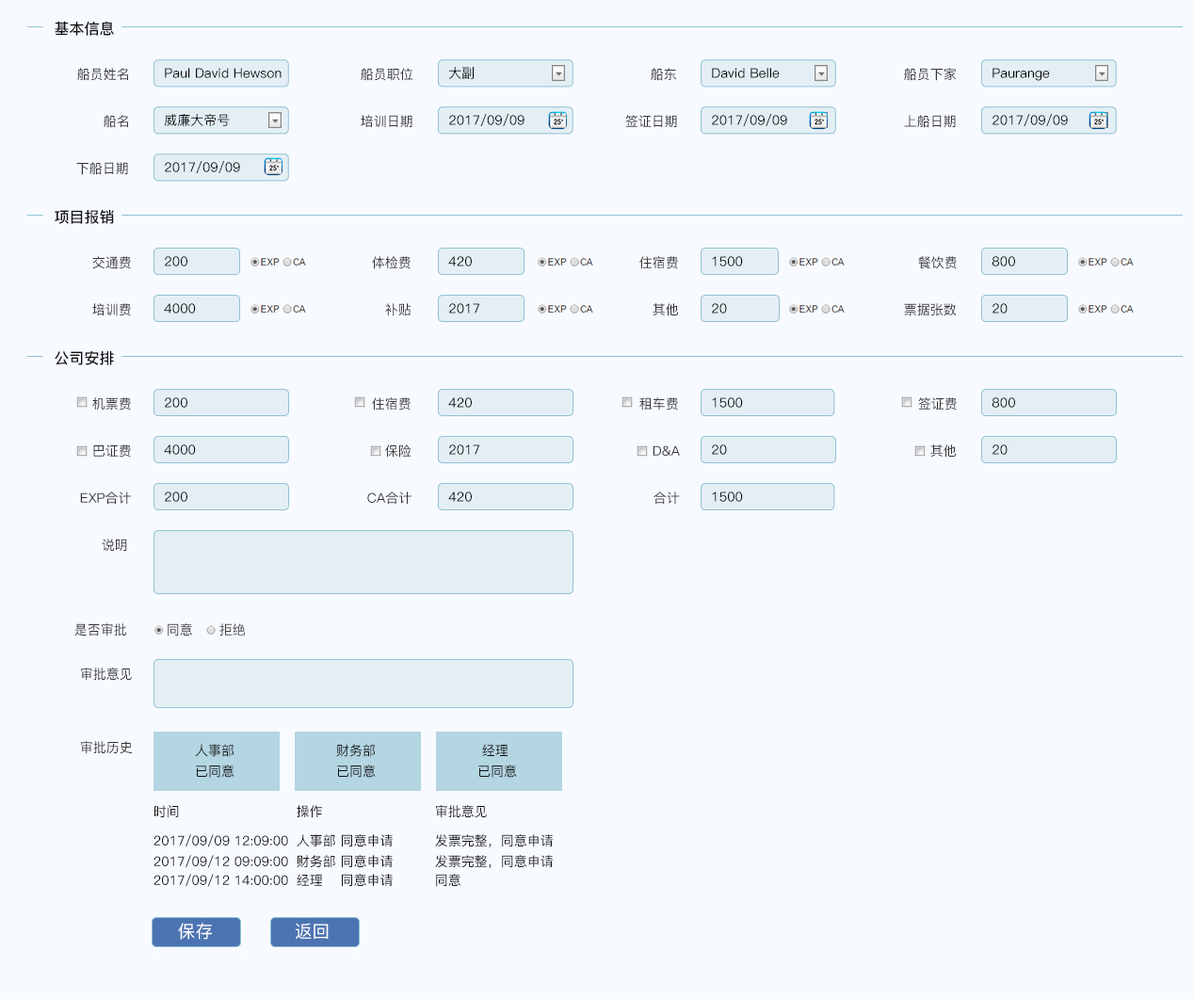
<style>
.page{position:relative;width:1194px;height:999px;background:#f7faff}
.page>*{position:absolute;margin:0}
.t1{font:15.1px "PingFang-SC-Bold";color:#111111}
.t2{font:13.2px "PingFang-SC-Medium";color:#333333}
.t3{font:13.2px "PingFang-SC-Medium";color:#030303}
.t4{font:13.2px "PingFang-SC-Medium"}
.t5{font:13.2px "PingFang-SC-Medium";color:#3e3e3e}
.t6{font:13.2px/20.7px "PingFang-SC-Medium";color:#121313}
.t7{font:13.2px "PingFang-SC-Medium";color:#121313}
</style>
<div class="page">
<p class="t1" style="left:55px;top:21px;width:59px;height:15px">基本信息</p>
<p class="t2" style="left:77px;top:68px;width:51px;height:13px">船员姓名</p>
<p class="t3" style="left:165px;top:68px;width:116px;height:10px">Paul David Hewson</p>
<p class="t2" style="left:361px;top:68px;width:52px;height:13px">船员职位</p>
<p class="t3" style="left:448px;top:67px;width:26px;height:12px">大副</p>
<p class="t2" style="left:651px;top:68px;width:25px;height:13px">船东</p>
<p class="t3" style="left:712px;top:68px;width:68px;height:10px">David Belle</p>
<p class="t2" style="left:904px;top:68px;width:52px;height:13px">船员下家</p>
<p class="t3" style="left:992px;top:68px;width:58px;height:13px">Paurange</p>
<p class="t3" style="left:165px;top:114px;width:65px;height:12px">威廉大帝号</p>
<p class="t3" style="left:449px;top:114px;width:75px;height:12px">2017/09/09</p>
<p class="t3" style="left:712px;top:114px;width:75px;height:12px">2017/09/09</p>
<p class="t3" style="left:992px;top:114px;width:76px;height:12px">2017/09/09</p>
<p class="t2" style="left:104px;top:115px;width:24px;height:13px">船名</p>
<p class="t2" style="left:361px;top:115px;width:51px;height:13px">培训日期</p>
<p class="t2" style="left:625px;top:115px;width:52px;height:13px">签证日期</p>
<p class="t2" style="left:904px;top:115px;width:52px;height:13px">上船日期</p>
<p class="t2" style="left:76px;top:162px;width:52px;height:13px">下船日期</p>
<p class="t3" style="left:165px;top:161px;width:75px;height:12px">2017/09/09</p>
<p class="t1" style="left:55px;top:210px;width:59px;height:14px">项目报销</p>
<p class="t2" style="left:92px;top:256px;width:39px;height:13px">交通费</p>
<p class="t3" style="left:165px;top:256px;width:22px;height:10px">200</p>
<p class="t2" style="left:372px;top:256px;width:38px;height:13px">体检费</p>
<p class="t3" style="left:448px;top:256px;width:24px;height:10px">420</p>
<p class="t2" style="left:639px;top:256px;width:39px;height:13px">住宿费</p>
<p class="t3" style="left:712px;top:256px;width:31px;height:10px">1500</p>
<p class="t2" style="left:918px;top:256px;width:39px;height:13px">餐饮费</p>
<p class="t3" style="left:991px;top:256px;width:24px;height:10px">800</p>
<p class="t2" style="left:92px;top:303px;width:39px;height:13px">培训费</p>
<p class="t3" style="left:164px;top:303px;width:32px;height:11px">4000</p>
<p class="t2" style="left:385px;top:303px;width:25px;height:13px">补贴</p>
<p class="t3" style="left:449px;top:303px;width:30px;height:11px">2017</p>
<p class="t2" style="left:652px;top:303px;width:26px;height:13px">其他</p>
<p class="t3" style="left:712px;top:303px;width:15px;height:11px">20</p>
<p class="t2" style="left:904px;top:303px;width:53px;height:13px">票据张数</p>
<p class="t3" style="left:992px;top:303px;width:15px;height:11px">20</p>
<p class="t1" style="left:55px;top:350px;width:59px;height:15px">公司安排</p>
<p class="t2" style="left:92px;top:397px;width:39px;height:13px">机票费</p>
<p class="t3" style="left:165px;top:397px;width:22px;height:11px">200</p>
<p class="t2" style="left:372px;top:397px;width:38px;height:13px">住宿费</p>
<p class="t3" style="left:448px;top:397px;width:24px;height:11px">420</p>
<p class="t2" style="left:639px;top:397px;width:39px;height:13px">租车费</p>
<p class="t3" style="left:712px;top:397px;width:31px;height:11px">1500</p>
<p class="t2" style="left:918px;top:397px;width:39px;height:13px">签证费</p>
<p class="t3" style="left:991px;top:397px;width:24px;height:11px">800</p>
<p class="t2" style="left:93px;top:444px;width:38px;height:14px">巴证费</p>
<p class="t3" style="left:164px;top:444px;width:32px;height:11px">4000</p>
<p class="t2" style="left:385px;top:444px;width:26px;height:14px">保险</p>
<p class="t3" style="left:449px;top:444px;width:30px;height:11px">2017</p>
<p class="t2" style="left:652px;top:445px;width:28px;height:11px">D&amp;A</p>
<p class="t3" style="left:712px;top:444px;width:15px;height:11px">20</p>
<p class="t2" style="left:930px;top:444px;width:26px;height:14px">其他</p>
<p class="t3" style="left:992px;top:444px;width:15px;height:11px">20</p>
<p class="t2" style="left:80px;top:491px;width:51px;height:14px">EXP合计</p>
<p class="t3" style="left:165px;top:491px;width:22px;height:11px">200</p>
<p class="t2" style="left:367px;top:491px;width:44px;height:14px">CA合计</p>
<p class="t3" style="left:448px;top:491px;width:24px;height:11px">420</p>
<p class="t4" style="left:653px;top:491px;width:27px;height:14px">合计</p>
<p class="t3" style="left:712px;top:491px;width:31px;height:11px">1500</p>
<p class="t2" style="left:102px;top:539px;width:25px;height:13px">说明</p>
<p class="t2" style="left:74px;top:623px;width:52px;height:13px">是否审批</p>
<p class="t5" style="left:168px;top:623px;width:24px;height:13px">同意</p>
<p class="t5" style="left:219px;top:623px;width:26px;height:12px">拒绝</p>
<p class="t2" style="left:81px;top:667px;width:51px;height:14px">审批意见</p>
<p class="t2" style="left:81px;top:741px;width:51px;height:13px">审批历史</p>
<p class="t6" style="left:195px;top:744px;width:39px;height:34px">人事部<br>已同意</p>
<p class="t6" style="left:336px;top:744px;width:40px;height:34px">财务部<br>已同意</p>
<p class="t6" style="left:478px;top:744px;width:39px;height:34px">经理<br>已同意</p>
<p class="t7" style="left:154px;top:805px;width:25px;height:13px">时间</p>
<p class="t7" style="left:297px;top:805px;width:25px;height:13px">操作</p>
<p class="t7" style="left:436px;top:805px;width:51px;height:13px">审批意见</p>
<p class="t7" style="left:153px;top:834px;width:135px;height:13px">2017/09/09 12:09:00</p>
<p class="t7" style="left:297px;top:834px;width:96px;height:13px">人事部 同意申请</p>
<p class="t7" style="left:435px;top:834px;width:119px;height:13px">发票完整，同意申请</p>
<p class="t7" style="left:153px;top:855px;width:135px;height:13px">2017/09/12 09:09:00</p>
<p class="t7" style="left:297px;top:855px;width:96px;height:13px">财务部 同意申请</p>
<p class="t7" style="left:435px;top:855px;width:119px;height:13px">发票完整，同意申请</p>
<p class="t7" style="left:153px;top:874px;width:135px;height:13px">2017/09/12 14:00:00</p>
<p class="t7" style="left:297px;top:874px;width:96px;height:13px">经理    同意申请</p>
<p class="t7" style="left:436px;top:874px;width:24px;height:13px">同意</p>
</div>
